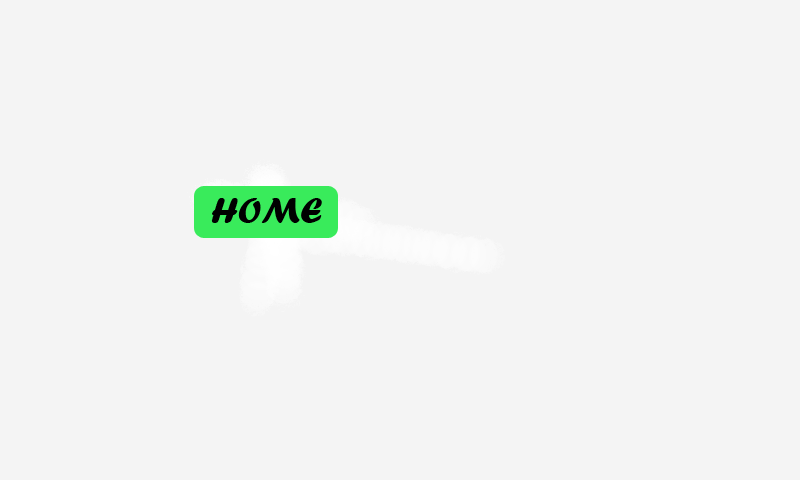
<style>
.page{position:relative;width:800px;height:480px;background:#f4f4f4}
.page>*{position:absolute;margin:0}
.t1{font:36px "ForteMT";color:#000000}
</style>
<div class="page">
<p class="t1" style="left:211px;top:198px;width:111px;height:25px">HOME</p>
</div>
